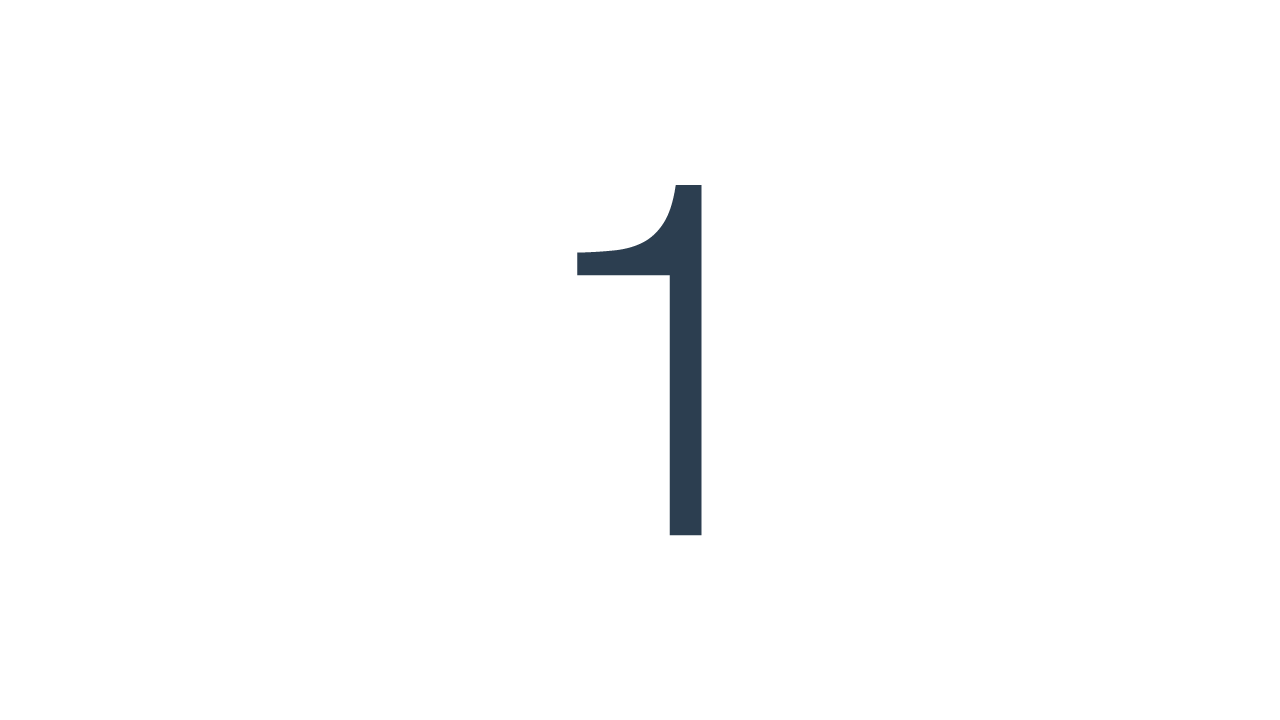
<style>
.page{position:relative;width:1280px;height:720px;background:#ffffff}
.page>*{position:absolute;margin:0}
.t1{font:500px "HelveticaNeue-Light";color:#2c3e50}
</style>
<div class="page">
<p class="t1" style="left:577px;top:185px;width:125px;height:351px">1</p>
</div>
